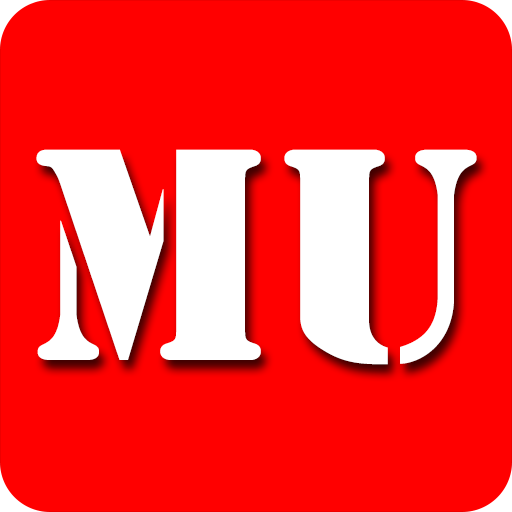
<style>
.page{position:relative;width:512px;height:512px;background:#ff0000}
.page>*{position:absolute;margin:0}
.t1{font:281px "StencilStd";color:#ffffff}
</style>
<div class="page">
<p class="t1" style="left:36px;top:149px;width:441px;height:216px">MU</p>
</div>
